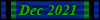
<style>
.page{position:relative;width:100px;height:20px}
.page>*{position:absolute;margin:0}
.t1{font:15px "TimesNewRomanPS-BoldItalicMT";color:#11ad00}
</style>
<div class="page">
<p class="t1" style="left:18px;top:5px;width:59px;height:10px">Dec 2021</p>
</div>
